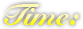
<style>
.page{position:relative;width:83px;height:29px;background:#ffffff}
.page>*{position:absolute;margin:0}
.t1{font:30px "SnellRoundhand-Black"}
</style>
<div class="page">
<p class="t1" style="left:4px;top:4px;width:75px;height:21px">Time:</p>
</div>
